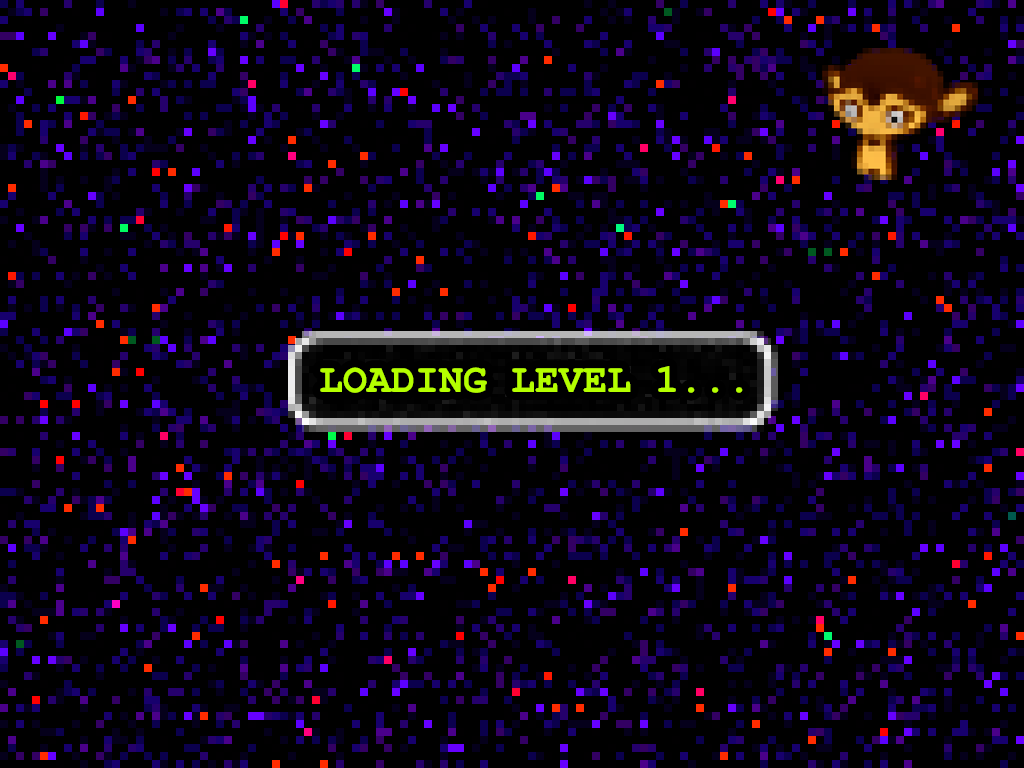
<style>
.page{position:relative;width:1024px;height:768px;background:#000000}
.page>*{position:absolute;margin:0}
.t1{font:40px "CourierNewPS-BoldMT";color:#b4ff00}
</style>
<div class="page">
<p class="t1" style="left:320px;top:366px;width:423px;height:27px">LOADING LEVEL 1...</p>
</div>
